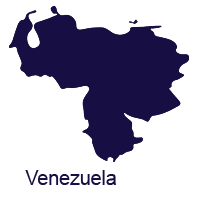
<style>
.page{position:relative;width:200px;height:200px;background:#ffffff}
.page>*{position:absolute;margin:0}
.t1{font:20.8px "ArialMT";color:#170f44;scale:0.94 1}
</style>
<div class="page">
<p class="t1" style="left:25px;top:170px;width:91px;height:15px">Venezuela</p>
</div>
